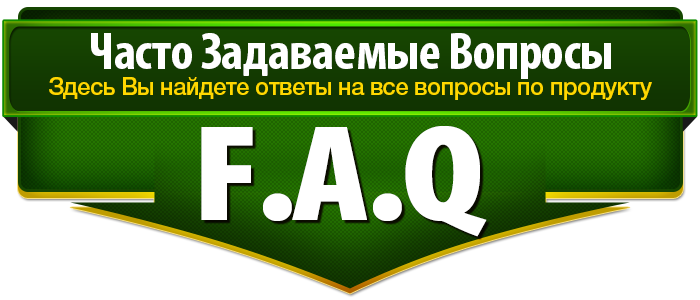
<style>
.page{position:relative;width:700px;height:300px;background:#ffffff}
.page>*{position:absolute;margin:0}
.t1{font:52.6px "MyriadPro-BoldCond";letter-spacing:-0.01em;color:#ffffff}
.t2{font:24px "Helvetica-6-Medium";letter-spacing:-0.025em;color:#ffd800}
.t3{font:138.2px "MyriadPro-BlackCond";letter-spacing:-0.025em;color:#ffffff;scale:1.19 1}
</style>
<div class="page">
<p class="t1" style="left:91px;top:33px;width:520px;height:46px">Часто Задаваемые Вопросы</p>
<p class="t2" style="left:49px;top:77px;width:603px;height:23px">Здесь Вы найдете ответы на все вопросы по продукту</p>
<p class="t3" style="left:201px;top:126px;width:286px;height:111px">F.A.Q</p>
</div>
